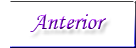
<style>
.page{position:relative;width:136px;height:48px;background:#ffffff}
.page>*{position:absolute;margin:0}
.t1{font:24px "MonotypeCorsiva"}
</style>
<div class="page">
<p class="t1" style="left:30px;top:14px;width:76px;height:18px">Anterior</p>
</div>
